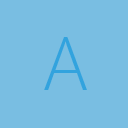
<style>
.page{position:relative;width:128px;height:128px;background:#79bee2}
.page>*{position:absolute;margin:0}
.t1{font:75px "SegoeUI-Light";color:#32a3de}
</style>
<div class="page">
<p class="t1" style="left:44px;top:37px;width:43px;height:53px">A</p>
</div>
